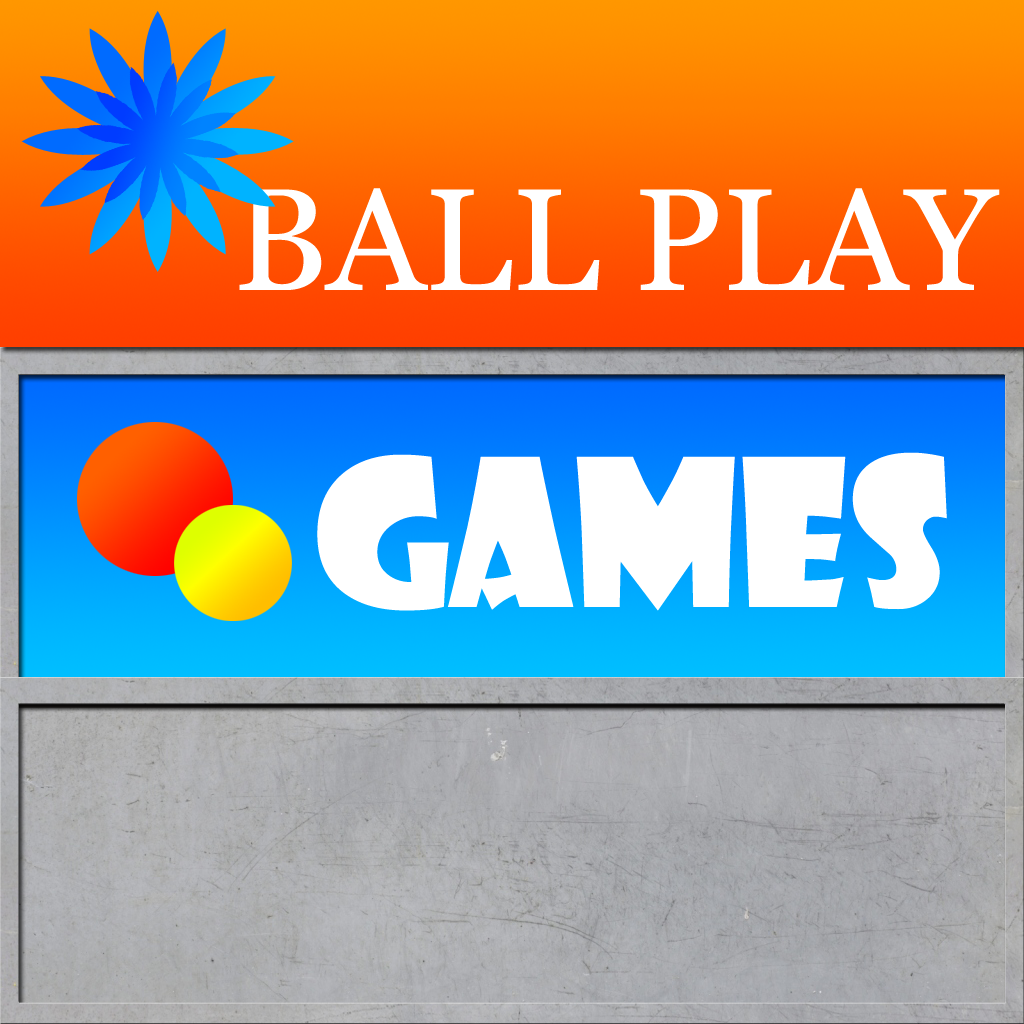
<style>
.page{position:relative;width:1024px;height:1024px}
.page>*{position:absolute;margin:0}
.t1{font:144.6px "Vani";color:#ffffff}
.t2{font:200px "ShowcardGothic-Reg";color:#ffffff}
</style>
<div class="page">
<p class="t1" style="left:239px;top:188px;width:761px;height:102px">BALL PLAY</p>
<p class="t2" style="left:317px;top:452px;width:630px;height:159px">GAMES</p>
</div>
